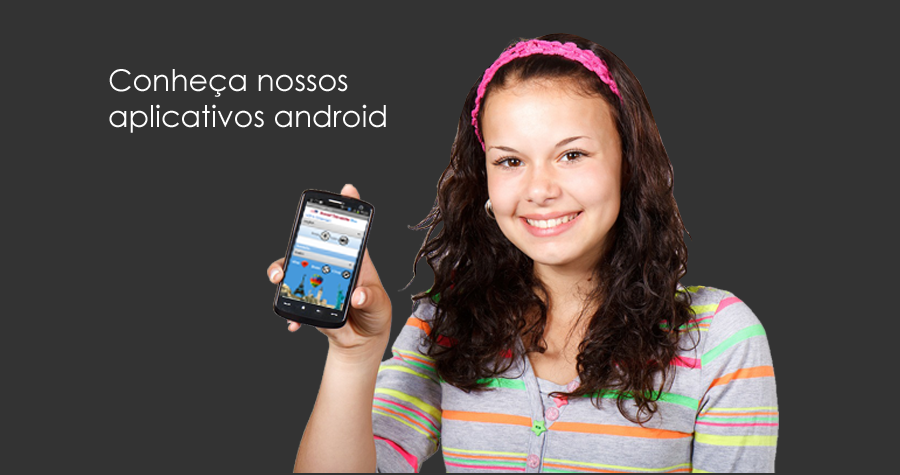
<style>
.page{position:relative;width:900px;height:475px;background:#333333}
.page>*{position:absolute;margin:0}
.t1{font:30px "CenturyGothic";color:#fefefe}
</style>
<div class="page">
<p class="t1" style="left:109px;top:69px;width:277px;height:64px">Conheça nossos<br>aplicativos android</p>
</div>
